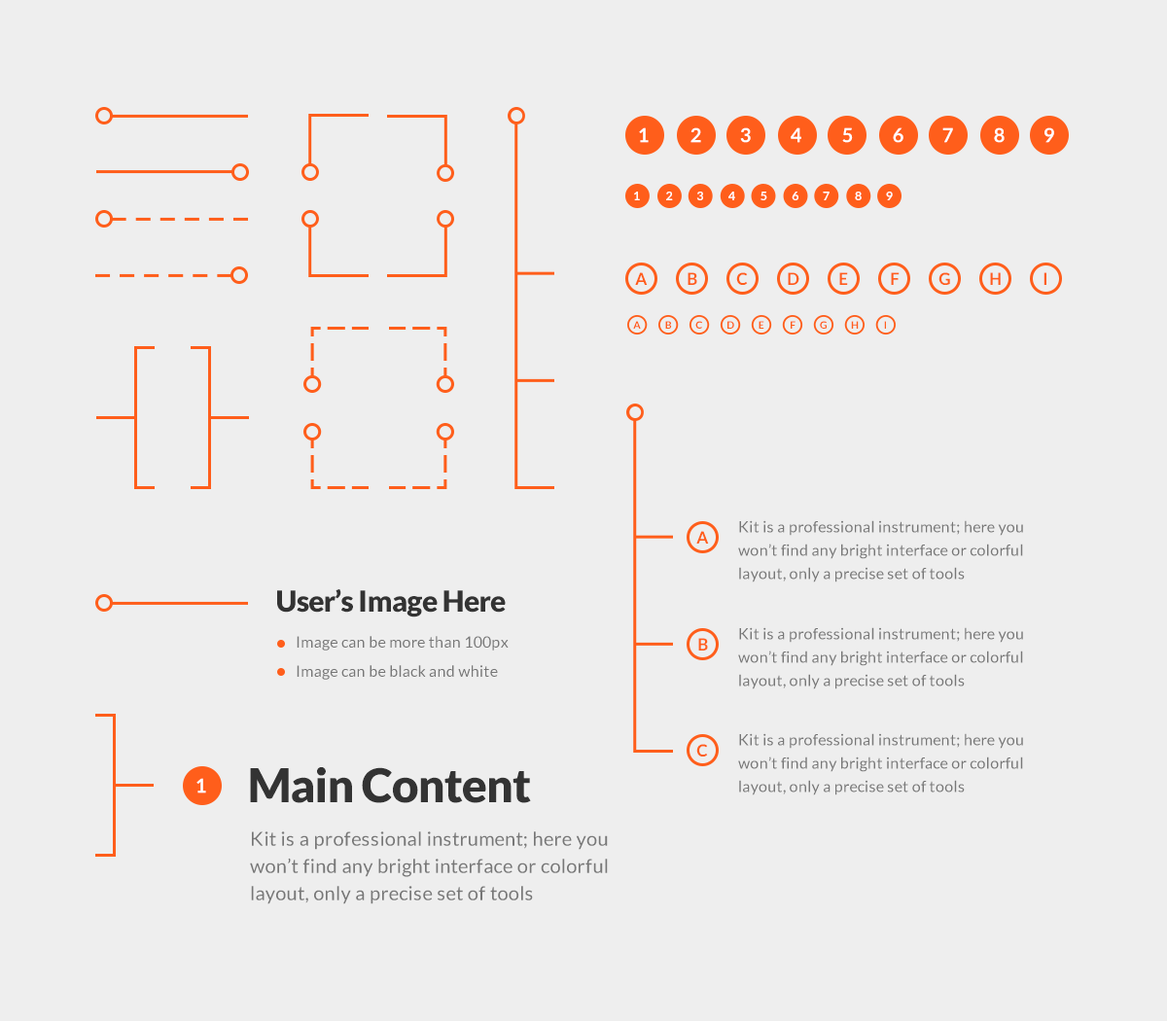
<style>
.page{position:relative;width:1167px;height:1021px;background:#eeeeee}
.page>*{position:absolute;margin:0}
.t1{font:19.5px "Lato-Bold";letter-spacing:0.02em;color:#ffffff}
.t2{font:12.2px "Lato-Bold";letter-spacing:0.02em;color:#ffffff}
.t3{font:16.5px "Lato-Bold";letter-spacing:0.02em;color:#ff5e1b}
.t4{font:10px "Lato-Bold";letter-spacing:0.02em;color:#ff5e1b}
.t5{font:15.6px/23.3px "Lato-Regular";letter-spacing:0.02em;color:#777777}
.t6{font:29.2px "Lato-Black";letter-spacing:-0.02em;color:#333333}
.t7{font:15.6px/29.2px "Lato-Regular";letter-spacing:0.02em;color:#777777}
.t8{font:46.7px "Lato-Black";letter-spacing:-0.02em;color:#333333}
.t9{font:19.5px/27.2px "Lato-Regular";letter-spacing:0.02em;color:#777777}
</style>
<div class="page">
<p class="t1" style="left:639px;top:127px;width:10px;height:16px">1</p>
<p class="t1" style="left:691px;top:127px;width:10px;height:16px">2</p>
<p class="t1" style="left:740px;top:127px;width:11px;height:16px">3</p>
<p class="t1" style="left:791px;top:127px;width:11px;height:16px">4</p>
<p class="t1" style="left:842px;top:127px;width:11px;height:16px">5</p>
<p class="t1" style="left:893px;top:127px;width:11px;height:16px">6</p>
<p class="t1" style="left:943px;top:127px;width:10px;height:16px">7</p>
<p class="t1" style="left:994px;top:127px;width:11px;height:16px">8</p>
<p class="t1" style="left:1045px;top:127px;width:10px;height:16px">9</p>
<p class="t2" style="left:634px;top:192px;width:6px;height:8px">1</p>
<p class="t2" style="left:666px;top:192px;width:7px;height:8px">2</p>
<p class="t2" style="left:697px;top:192px;width:6px;height:8px">3</p>
<p class="t2" style="left:729px;top:192px;width:6px;height:8px">4</p>
<p class="t2" style="left:761px;top:192px;width:7px;height:8px">5</p>
<p class="t2" style="left:792px;top:192px;width:7px;height:8px">6</p>
<p class="t2" style="left:823px;top:192px;width:7px;height:8px">7</p>
<p class="t2" style="left:855px;top:192px;width:7px;height:8px">8</p>
<p class="t2" style="left:886px;top:192px;width:7px;height:8px">9</p>
<p class="t3" style="left:635px;top:272px;width:13px;height:13px">A</p>
<p class="t3" style="left:688px;top:272px;width:10px;height:13px">B</p>
<p class="t3" style="left:736px;top:272px;width:12px;height:13px">C</p>
<p class="t3" style="left:788px;top:272px;width:12px;height:13px">D</p>
<p class="t3" style="left:840px;top:272px;width:8px;height:13px">E</p>
<p class="t3" style="left:891px;top:272px;width:9px;height:13px">F</p>
<p class="t3" style="left:939px;top:272px;width:11px;height:13px">G</p>
<p class="t3" style="left:990px;top:272px;width:11px;height:13px">H</p>
<p class="t3" style="left:1044px;top:272px;width:3px;height:13px">I</p>
<p class="t4" style="left:633px;top:321px;width:8px;height:8px">A</p>
<p class="t4" style="left:665px;top:321px;width:7px;height:8px">B</p>
<p class="t4" style="left:696px;top:321px;width:6px;height:8px">C</p>
<p class="t4" style="left:728px;top:321px;width:6px;height:8px">D</p>
<p class="t4" style="left:759px;top:321px;width:6px;height:8px">E</p>
<p class="t4" style="left:791px;top:321px;width:5px;height:8px">F</p>
<p class="t4" style="left:820px;top:321px;width:7px;height:8px">G</p>
<p class="t4" style="left:851px;top:321px;width:8px;height:8px">H</p>
<p class="t4" style="left:884px;top:321px;width:2px;height:8px">I</p>
<p class="t5" style="left:738px;top:520px;width:285px;height:63px">Kit is a professional instrument; here you won’t find any bright interface or colorful layout, only a precise set of tools</p>
<p class="t3" style="left:697px;top:531px;width:12px;height:13px">A</p>
<p class="t6" style="left:277px;top:589px;width:229px;height:29px">User’s Image Here</p>
<p class="t5" style="left:738px;top:627px;width:285px;height:63px">Kit is a professional instrument; here you won’t find any bright interface or colorful layout, only a precise set of tools</p>
<p class="t7" style="left:297px;top:636px;width:212px;height:44px">Image can be more than 100px<br>Image can be black and white</p>
<p class="t3" style="left:698px;top:638px;width:10px;height:13px">B</p>
<p class="t5" style="left:738px;top:734px;width:285px;height:62px">Kit is a professional instrument; here you won’t find any bright interface or colorful layout, only a precise set of tools</p>
<p class="t3" style="left:697px;top:744px;width:11px;height:13px">C</p>
<p class="t8" style="left:250px;top:768px;width:281px;height:36px">Main Content</p>
<p class="t1" style="left:197px;top:778px;width:9px;height:16px">1</p>
<p class="t9" style="left:250px;top:832px;width:358px;height:73px">Kit is a professional instrument; here you won’t find any bright interface or colorful layout, only a precise set of tools</p>
</div>
